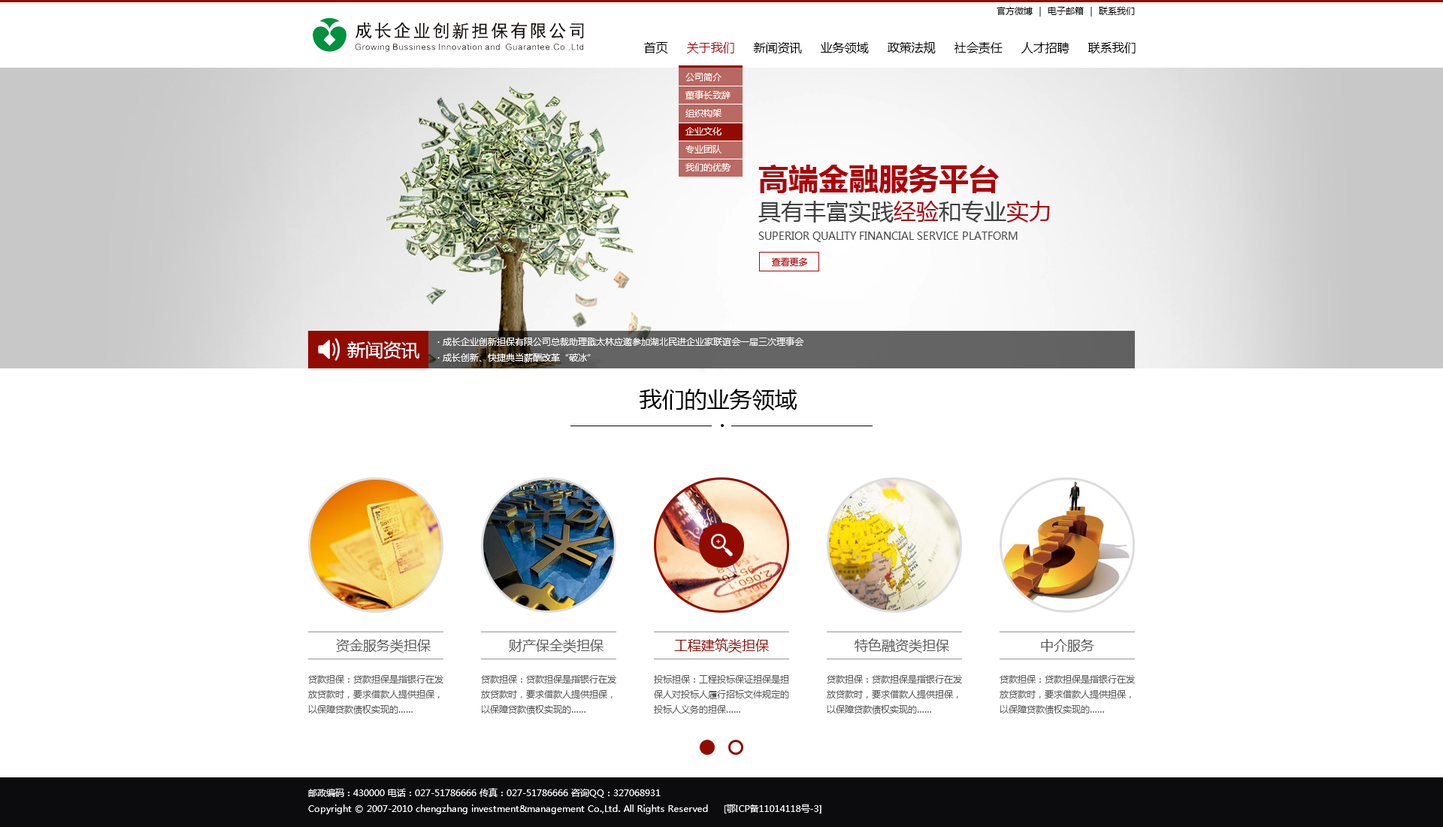
<style>
.page{position:relative;width:1443px;height:827px;background:#ffffff}
.page>*{position:absolute;margin:0}
.t1{font:9px "MicrosoftYaHei";color:#010101}
.t2{font:12px "MicrosoftYaHei";color:#000000}
.t3{font:12px "MicrosoftYaHei";color:#ae0309}
.t4{font:9px/3px "MicrosoftYaHei";color:#ffffff}
.t5{font:18px "MicrosoftYaHei";color:#ffffff}
.t6{font:9px/0.8px "MicrosoftYaHei";color:#ffffff}
.t7{font:22.5px "MicrosoftYaHei";color:#010101}
.t8{font:13.5px "MicrosoftYaHei";color:#595757}
.t9{font:13.5px "MicrosoftYaHei";color:#920b00}
.t10{font:9px/15px "MicrosoftYaHei";color:#595757}
.t11{font:9px/0.8px "MicrosoftYaHei";color:#fefefe}
</style>
<div class="page">
<p class="t1" style="left:996px;top:7px;width:139px;height:10px">官方微博 ｜ 电子邮箱 ｜ 联系我们</p>
<p class="t2" style="left:644px;top:41px;width:491px;height:12px">首页     <span class="t3">关于我们</span>     新闻资讯     业务领域     政策法规     社会责任     人才招聘     联系我们</p>
<p class="t4" style="left:685px;top:73px;width:45px;height:98px">公司简介<br>董事长致辞<br>组织构架<br>企业文化<br>专业团队<br>我们的优势</p>
<p class="t5" style="left:347px;top:341px;width:72px;height:17px">新闻资讯</p>
<p class="t6" style="left:437px;top:337px;width:367px;height:25px">· 成长企业创新担保有限公司总裁助理戢太林应邀参加湖北民进企业家联谊会一届三次理事会<br>· 成长创新、快捷典当薪酬改革“破冰”</p>
<p class="t7" style="left:639px;top:388px;width:158px;height:22px">我们的业务领域</p>
<p class="t8" style="left:336px;top:639px;width:95px;height:13px">资金服务类担保</p>
<p class="t8" style="left:509px;top:639px;width:94px;height:13px">财产保全类担保</p>
<p class="t9" style="left:674px;top:638px;width:95px;height:14px">工程建筑类担保</p>
<p class="t8" style="left:854px;top:638px;width:95px;height:14px">特色融资类担保</p>
<p class="t8" style="left:1041px;top:639px;width:53px;height:12px">中介服务</p>
<p class="t10" style="left:308px;top:675px;width:135px;height:39px">贷款担保：贷款担保是指银行在发放贷款时，要求借款人提供担保，以保障贷款债权实现的……</p>
<p class="t10" style="left:481px;top:675px;width:135px;height:39px">贷款担保：贷款担保是指银行在发放贷款时，要求借款人提供担保，以保障贷款债权实现的……</p>
<p class="t10" style="left:654px;top:675px;width:135px;height:38px">投标担保：工程投标保证担保是担保人对投标人履行招标文件规定的投标人义务的担保……</p>
<p class="t10" style="left:827px;top:675px;width:135px;height:39px">贷款担保：贷款担保是指银行在发放贷款时，要求借款人提供担保，以保障贷款债权实现的……</p>
<p class="t10" style="left:999px;top:675px;width:136px;height:39px">贷款担保：贷款担保是指银行在发放贷款时，要求借款人提供担保，以保障贷款债权实现的……</p>
<p class="t11" style="left:308px;top:787px;width:513px;height:27px">邮政编码：430000 电话：027-51786666 传真：027-51786666 咨询QQ：327068931<br>Copyright © 2007-2010 chengzhang investment&amp;management Co.,Ltd. All Rights Reserved     [鄂ICP备11014118号-3]</p>
</div>
